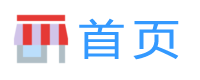
<style>
.page{position:relative;width:200px;height:80px;background:#ffffff}
.page>*{position:absolute;margin:0}
.t1{font:41.3px "MicrosoftYaHei";letter-spacing:0.18em;color:#3399ff;scale:1.13 1}
</style>
<div class="page">
<p class="t1" style="left:79px;top:18px;width:100px;height:42px">首页</p>
</div>
